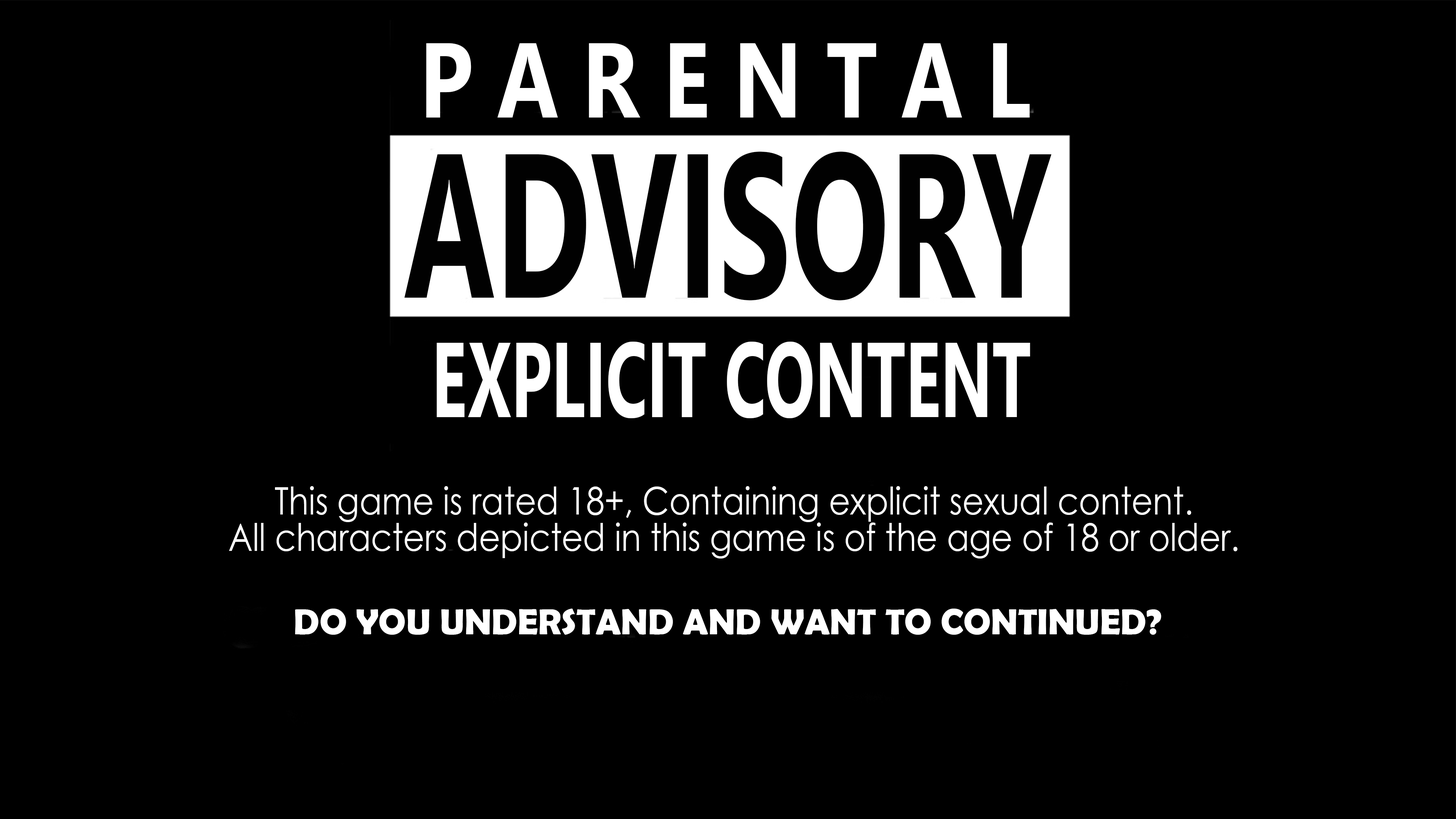
<style>
.page{position:relative;width:1456px;height:819px;background:#000000}
.page>*{position:absolute;margin:0}
.t1{font:106.2px "SegoeUI-Bold";color:#ffffff;scale:0.82 1}
.t2{font:204.7px "SegoeUI-Bold";color:#010101;scale:0.63 1}
.t3{font:106.2px "SegoeUI-Bold";color:#ffffff;scale:0.62 1}
.t4{font:37.9px/36.4px "CenturyGothic";color:#ffffff;scale:0.87 1}
.t5{font:36.4px "BerlinSansFBDemi-Bold";color:#ffffff}
</style>
<div class="page">
<p class="t1" style="left:426px;top:43px;width:604px;height:75px">P A R E N T A L</p>
<p class="t2" style="left:404px;top:152px;width:647px;height:148px">ADVISORY</p>
<p class="t3" style="left:436px;top:342px;width:594px;height:76px">EXPLICIT CONTENT</p>
<p class="t4" style="left:229px;top:486px;width:1009px;height:73px;text-align:center">This game is rated 18+, Containing explicit sexual content.<br>All characters depicted in this game is of the age of 18 or older.</p>
<p class="t5" style="left:295px;top:609px;width:866px;height:26px">DO YOU UNDERSTAND AND WANT TO CONTINUED?</p>
</div>
